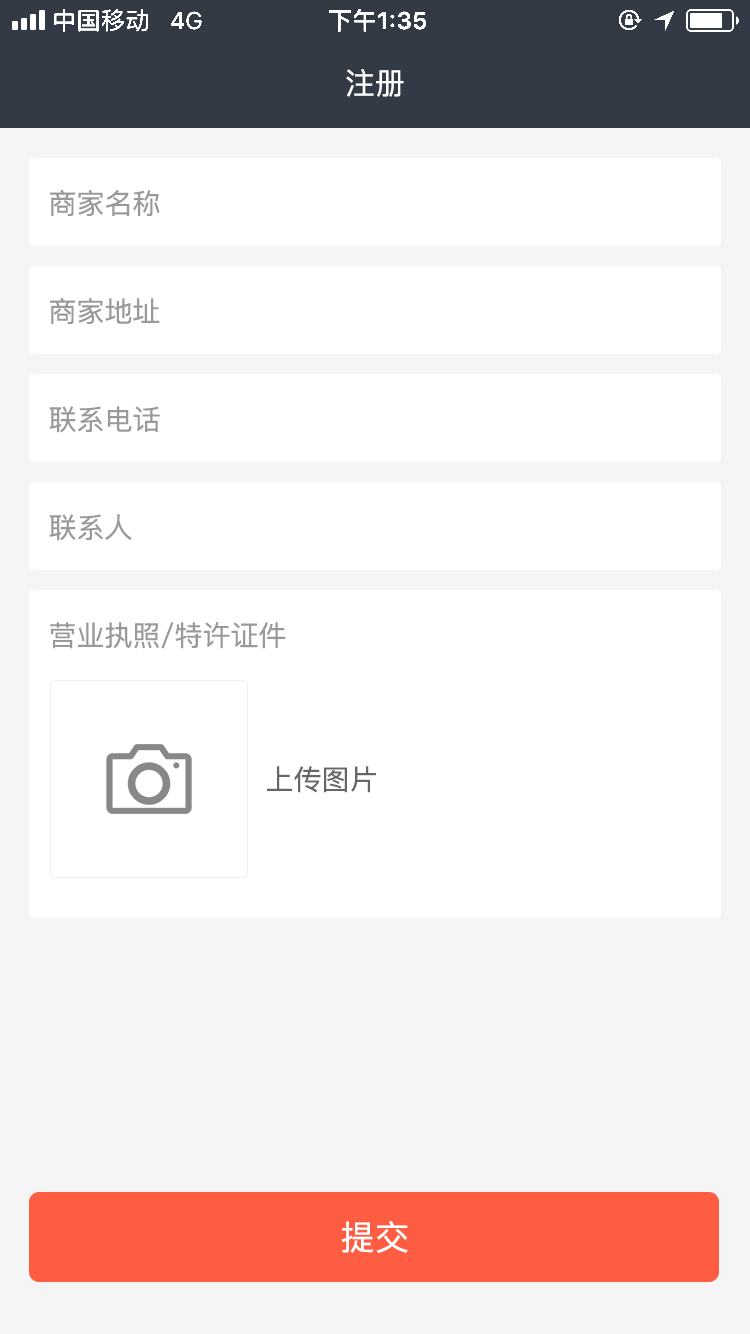
<style>
.page{position:relative;width:750px;height:1334px;background:#ffffff}
.page>*{position:absolute;margin:0}
.t1{font:30px "PingFang-SC-Medium";color:#ffffff}
.t2{font:28px "PingFang-SC-Medium";color:#999999}
.t3{font:28px "PingFang-SC-Medium";color:#666666}
.t4{font:34px "PingFang-SC-Medium";letter-spacing:0.02em;color:#ffffff}
</style>
<div class="page">
<p class="t1" style="left:346px;top:69px;width:58px;height:28px">注册</p>
<p class="t2" style="left:50px;top:190px;width:110px;height:26px">商家名称</p>
<p class="t2" style="left:50px;top:298px;width:110px;height:26px">商家地址</p>
<p class="t2" style="left:49px;top:406px;width:111px;height:27px">联系电话</p>
<p class="t2" style="left:49px;top:514px;width:83px;height:27px">联系人</p>
<p class="t2" style="left:50px;top:622px;width:236px;height:27px">营业执照/特许证件</p>
<p class="t3" style="left:267px;top:766px;width:109px;height:27px">上传图片</p>
<p class="t4" style="left:341px;top:1221px;width:67px;height:32px">提交</p>
</div>
